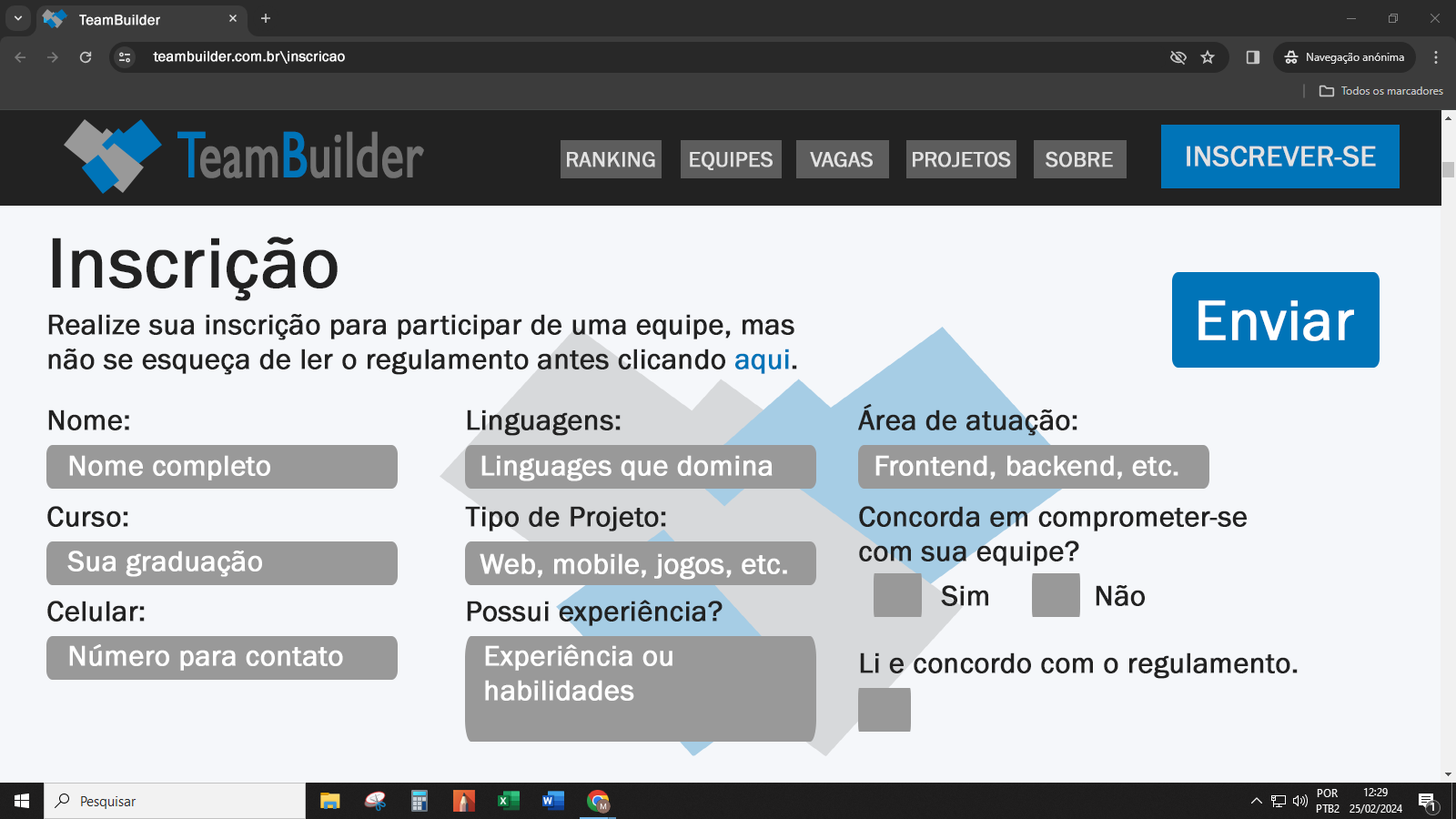
<style>
.page{position:relative;width:1456px;height:819px;background:#f5f7fa}
.page>*{position:absolute;margin:0}
.t1{font:10.9px "FranklinGothic-Book";color:#ffffff;font-weight:bold}
.t2{font:14.6px "FranklinGothic-Book";color:#ffffff;font-weight:bold}
.t3{font:65.8px "GillSansMT";color:#717171;font-weight:bold;scale:0.71 1}
.t4{font:65.8px "GillSansMT";color:#0074b8;font-weight:bold;scale:0.71 1}
.t5{font:29.1px "FranklinGothic-Book";color:#e2e2e2;font-weight:bold}
.t6{font:21.8px "FranklinGothic-Book";color:#e2e2e2;font-weight:bold}
.t7{font:72.8px "FranklinGothic-Book";color:#222222;font-weight:bold}
.t8{font:58.2px "FranklinGothic-Book";color:#ffffff;font-weight:bold}
.t9{font:29.1px "FranklinGothic-Book";color:#222222;font-weight:bold}
.t10{font:29.1px "FranklinGothic-Book";color:#0074b8;font-weight:bold}
.t11{font:29.1px "FranklinGothic-Book";color:#ffffff;font-weight:bold}
</style>
<div class="page">
<p class="t1" style="left:79px;top:15px;width:81px;height:10px">TeamBuilder</p>
<p class="t2" style="left:153px;top:51px;width:192px;height:13px">teambuilder.com.br\inscricao</p>
<p class="t3" style="left:177px;top:131px;width:247px;height:47px"><span class="t4">T</span>eam<span class="t4">B</span>uilder</p>
<p class="t5" style="left:1187px;top:146px;width:189px;height:21px">INSCREVER-SE</p>
<p class="t6" style="left:567px;top:151px;width:88px;height:16px">RANKING</p>
<p class="t6" style="left:690px;top:151px;width:83px;height:19px">EQUIPES</p>
<p class="t6" style="left:810px;top:151px;width:63px;height:16px">VAGAS</p>
<p class="t6" style="left:913px;top:151px;width:98px;height:16px">PROJETOS</p>
<p class="t6" style="left:1046px;top:151px;width:67px;height:16px">SOBRE</p>
<p class="t7" style="left:52px;top:237px;width:286px;height:64px">Inscrição</p>
<p class="t8" style="left:1198px;top:300px;width:156px;height:41px">Enviar</p>
<p class="t9" style="left:48px;top:314px;width:749px;height:61px">Realize sua inscrição para participar de uma equipe, mas não se esqueça de ler o regulamento antes clicando <span class="t10">aqui</span>.</p>
<p class="t9" style="left:48px;top:409px;width:81px;height:21px">Nome:</p>
<p class="t9" style="left:467px;top:409px;width:154px;height:27px">Linguagens:</p>
<p class="t9" style="left:858px;top:404px;width:219px;height:32px">Área de atuação:</p>
<p class="t11" style="left:69px;top:455px;width:201px;height:25px">Nome completo</p>
<p class="t11" style="left:481px;top:455px;width:292px;height:26px">Linguages que domina</p>
<p class="t11" style="left:875px;top:455px;width:303px;height:25px">Frontend, backend, etc.</p>
<p class="t9" style="left:47px;top:506px;width:81px;height:21px">Curso:</p>
<p class="t9" style="left:465px;top:506px;width:201px;height:25px">Tipo de Projeto:</p>
<p class="t9" style="left:859px;top:506px;width:388px;height:60px">Concorda em comprometer-se<br>com sua equipe?</p>
<p class="t11" style="left:67px;top:551px;width:195px;height:26px">Sua graduação</p>
<p class="t11" style="left:480px;top:553px;width:307px;height:27px">Web, mobile, jogos, etc.</p>
<p class="t9" style="left:941px;top:585px;width:47px;height:21px">Sim</p>
<p class="t9" style="left:1096px;top:585px;width:49px;height:21px">Não</p>
<p class="t9" style="left:47px;top:601px;width:98px;height:21px">Celular:</p>
<p class="t9" style="left:467px;top:600px;width:256px;height:26px">Possui experiência?</p>
<p class="t11" style="left:69px;top:644px;width:274px;height:27px">Número para contato</p>
<p class="t11" style="left:485px;top:644px;width:187px;height:57px">Experiência ou habilidades</p>
<p class="t9" style="left:860px;top:652px;width:438px;height:27px">Li e concordo com o regulamento.</p>
</div>
